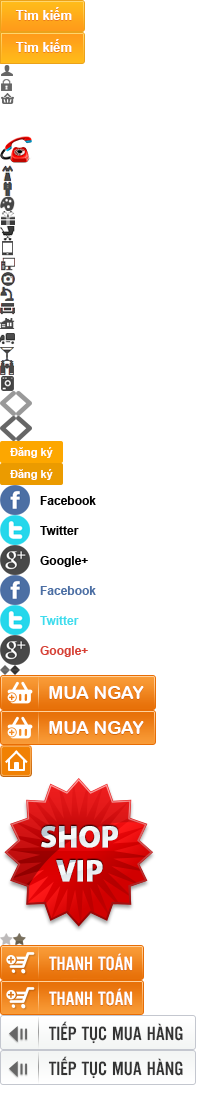
<style>
.page{position:relative;width:220px;height:1100px;background:#ffffff}
.page>*{position:absolute;margin:0}
.t1{font:13px "Arial-BoldMT"}
.t2{font:13px "Arial-BoldMT";color:#ffffff}
.t3{font:11px "Arial-BoldMT";color:#ffffff}
.t4{font:12px "Arial-BoldMT";color:#000000}
.t5{font:12px "Arial-BoldMT";color:#4c6fa4}
.t6{font:12px "Arial-BoldMT";color:#3fdced}
.t7{font:12px "Arial-BoldMT";color:#d64136}
.t8{font:18px "ArialRoundedMTBold";color:#ffffff}
.t9{font:20px "UTM-Alter-Gothic";color:#ffffff;text-transform:uppercase}
.t10{font:20px "UTM-Alter-Gothic";color:#333333;text-transform:uppercase}
</style>
<div class="page">
<p class="t1" style="left:15px;top:8px;width:57px;height:13px">Tìm kiếm</p>
<p class="t2" style="left:15px;top:7px;width:57px;height:13px">Tìm kiếm</p>
<p class="t1" style="left:15px;top:40px;width:57px;height:13px">Tìm kiếm</p>
<p class="t2" style="left:15px;top:39px;width:57px;height:13px">Tìm kiếm</p>
<p class="t3" style="left:10px;top:447px;width:43px;height:11px">Đăng ký</p>
<p class="t3" style="left:10px;top:469px;width:43px;height:11px">Đăng ký</p>
<p class="t4" style="left:40px;top:496px;width:56px;height:9px">Facebook</p>
<p class="t4" style="left:40px;top:526px;width:39px;height:9px">Twitter</p>
<p class="t4" style="left:40px;top:556px;width:48px;height:11px">Google+</p>
<p class="t5" style="left:40px;top:586px;width:56px;height:9px">Facebook</p>
<p class="t6" style="left:40px;top:616px;width:39px;height:9px">Twitter</p>
<p class="t7" style="left:40px;top:646px;width:48px;height:11px">Google+</p>
<p class="t8" style="left:49px;top:687px;width:95px;height:13px">MUA NGAY</p>
<p class="t8" style="left:49px;top:686px;width:95px;height:13px">MUA NGAY</p>
<p class="t8" style="left:49px;top:722px;width:95px;height:13px">MUA NGAY</p>
<p class="t8" style="left:49px;top:721px;width:95px;height:13px">MUA NGAY</p>
<p class="t9" style="left:49px;top:953px;width:84px;height:18px">thanh toán</p>
<p class="t9" style="left:49px;top:954px;width:84px;height:18px">thanh toán</p>
<p class="t9" style="left:49px;top:989px;width:84px;height:18px">thanh toán</p>
<p class="t9" style="left:49px;top:988px;width:84px;height:18px">thanh toán</p>
<p class="t10" style="left:48px;top:1021px;width:135px;height:23px">tiếp tục mua hàng</p>
<p class="t10" style="left:48px;top:1056px;width:135px;height:23px">tiếp tục mua hàng</p>
</div>
